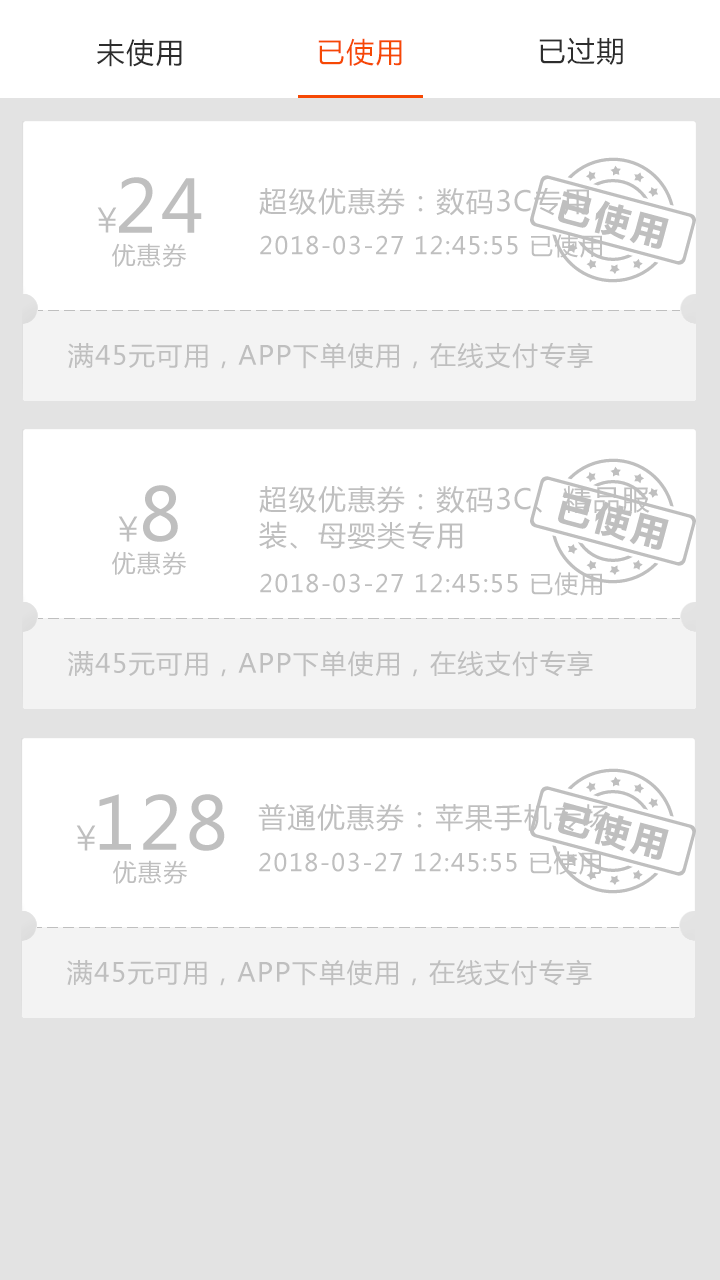
<style>
.page{position:relative;width:720px;height:1280px;background:#ffffff}
.page>*{position:absolute;margin:0}
.t1{font:28px "MicrosoftYaHei";letter-spacing:0.055em;color:#2d2d2d;text-transform:uppercase}
.t2{font:28px "MicrosoftYaHei";letter-spacing:0.055em;color:#f64804;text-transform:uppercase}
.t3{font:72px "MicrosoftYaHei";letter-spacing:0.055em;color:#bfbfbf;text-transform:uppercase}
.t4{font:28px "MicrosoftYaHei";letter-spacing:0.055em;color:#bfbfbf;text-transform:uppercase}
.t5{font:24px "MicrosoftYaHei";letter-spacing:0.055em;color:#bfbfbf;text-transform:uppercase}
.t6{font:26px "MicrosoftYaHei";letter-spacing:0.055em;color:#bfbfbf;text-transform:uppercase}
.t7{font:28px/36px "MicrosoftYaHei";letter-spacing:0.055em;color:#bfbfbf;text-transform:uppercase}
</style>
<div class="page">
<p class="t1" style="left:97px;top:39px;width:85px;height:28px">未使用</p>
<p class="t2" style="left:318px;top:38px;width:84px;height:28px">已使用</p>
<p class="t1" style="left:539px;top:37px;width:84px;height:28px">已过期</p>
<p class="t3" style="left:119px;top:177px;width:83px;height:56px">24</p>
<p class="t4" style="left:259px;top:188px;width:330px;height:28px">超级优惠券：数码3C专用</p>
<p class="t5" style="left:112px;top:243px;width:74px;height:25px">优惠券</p>
<p class="t5" style="left:260px;top:234px;width:342px;height:24px">2018-03-27 12:45:55 已使用</p>
<p class="t6" style="left:68px;top:342px;width:525px;height:27px">满45元可用，APP下单使用，在线支付专享</p>
<p class="t3" style="left:143px;top:485px;width:35px;height:57px">8</p>
<p class="t7" style="left:259px;top:486px;width:391px;height:64px">超级优惠券：数码3C、精品服<br>装、母婴类专用</p>
<p class="t5" style="left:112px;top:551px;width:74px;height:25px">优惠券</p>
<p class="t5" style="left:260px;top:572px;width:342px;height:24px">2018-03-27 12:45:55 已使用</p>
<p class="t6" style="left:68px;top:650px;width:525px;height:27px">满45元可用，APP下单使用，在线支付专享</p>
<p class="t3" style="left:99px;top:794px;width:126px;height:57px">128</p>
<p class="t4" style="left:258px;top:803px;width:352px;height:29px">普通优惠券：苹果手机专场</p>
<p class="t5" style="left:259px;top:851px;width:342px;height:24px">2018-03-27 12:45:55 已使用</p>
<p class="t5" style="left:113px;top:860px;width:74px;height:25px">优惠券</p>
<p class="t6" style="left:67px;top:959px;width:525px;height:27px">满45元可用，APP下单使用，在线支付专享</p>
</div>
